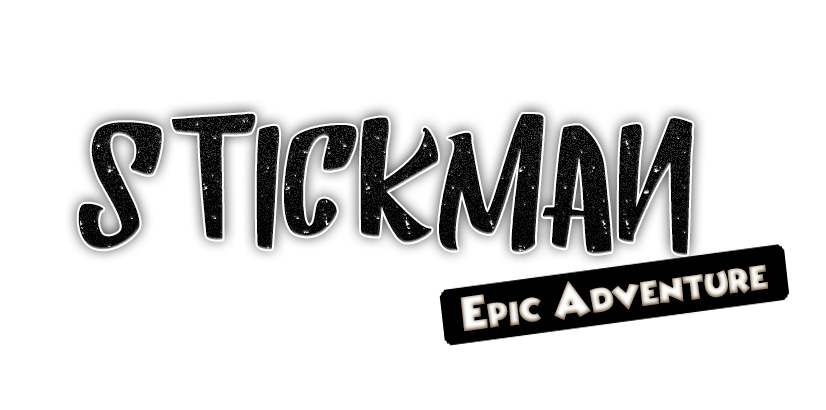
<style>
.page{position:relative;width:826px;height:410px;background:#ffffff}
.page>*{position:absolute;margin:0}
.t1{font:166.7px "HumblleRoughtAllCaps";color:#060606}
.t2{font:40px "WickedMouse";font-variant:small-caps;font-weight:bold}
</style>
<div class="page">
<p class="t1" style="left:78px;top:113px;width:615px;height:142px">StickMan</p>
<p class="t2" style="left:460px;top:264px;width:308px;height:68px;rotate:-8deg">Epic Adventure</p>
</div>
